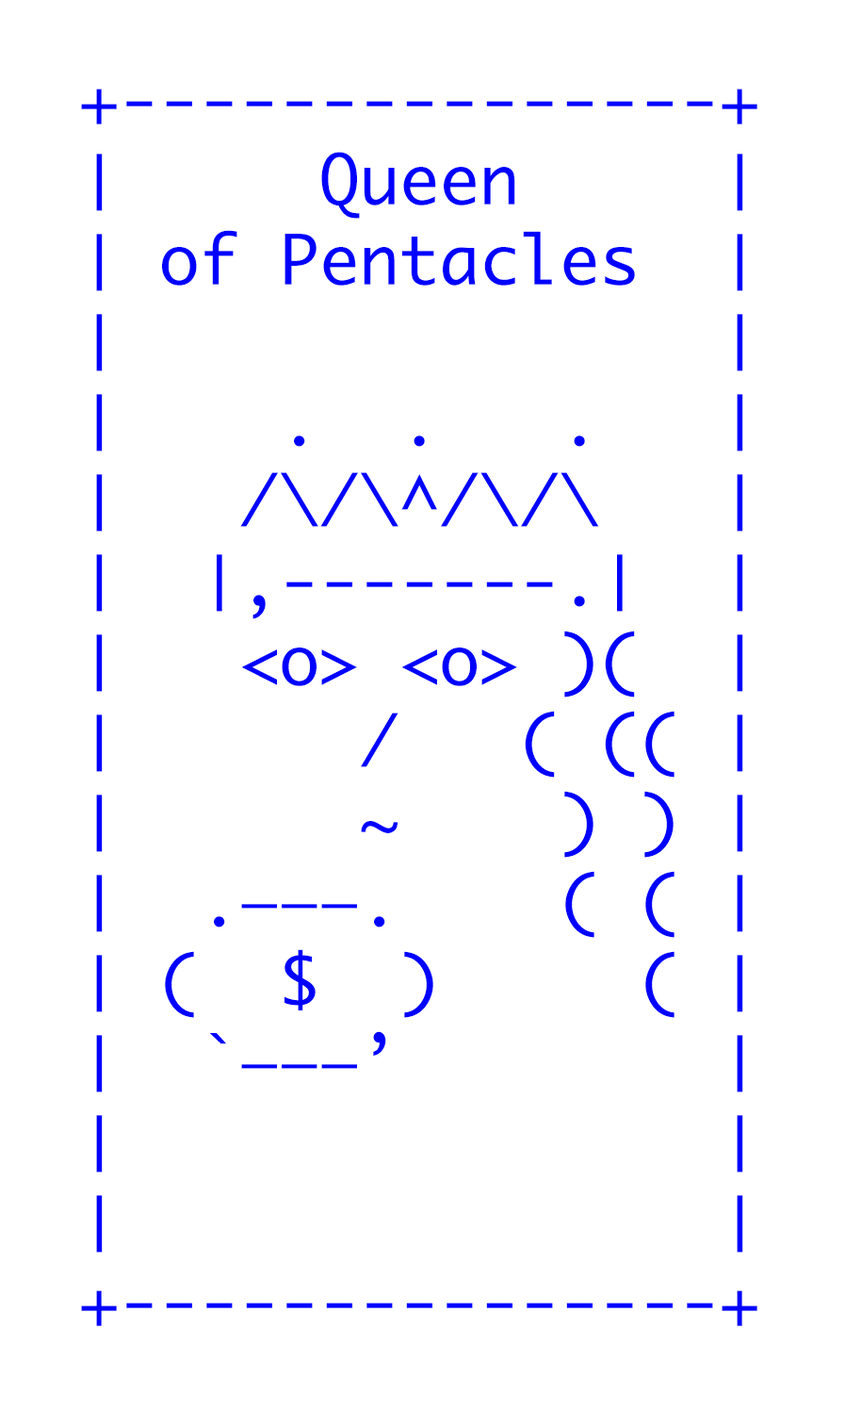
<style>
.page{position:relative;width:845px;height:1411px;background:#ffffff}
.page>*{position:absolute;margin:0}
.t1{font:66.7px "Monaco";color:#0000ff}
</style>
<div class="page">
<p class="t1" style="left:81px;top:89px;width:677px;height:1237px">+---------------+<br>│     Queen     │<br>│ of Pentacles  │<br>│               │<br>│    .  .   .   │<br>│   /\/\^/\/\   │<br>│  │,-------.│  │<br>│   &lt;o&gt; &lt;o&gt; )(  │ <br>│      /   ( (( │ <br>│      ~    ) ) │<br>│  .———.    ( ( │ <br>│ (  $  )     ( │<br>│  `———’        │<br>│               │<br>│               │<br>+---------------+</p>
</div>
